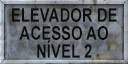
<style>
.page{position:relative;width:128px;height:64px}
.page>*{position:absolute;margin:0}
.t1{font:18.7px/18px "Arial-BoldMT";color:#0d0d0d;text-transform:uppercase;scale:0.8 1}
</style>
<div class="page">
<p class="t1" style="left:12px;top:8px;width:105px;height:50px;text-align:center">Elevador de<br>acesso ao<br>NÍVEL 2</p>
</div>
